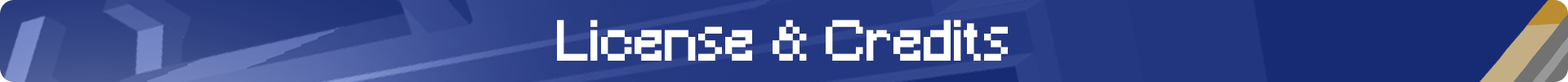
<style>
.page{position:relative;width:1568px;height:82px}
.page>*{position:absolute;margin:0}
.t1{font:53.8px "Minecraft";color:#ffffff}
</style>
<div class="page">
<p class="t1" style="left:557px;top:20px;width:451px;height:40px">License &amp; Credits</p>
</div>
